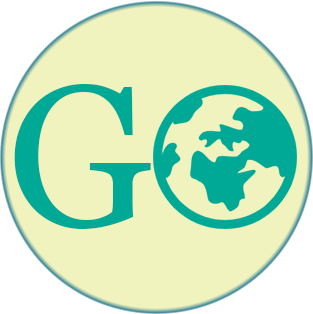
<style>
.page{position:relative;width:313px;height:314px;background:#f0f3bd}
.page>*{position:absolute;margin:0}
.t1{font:200px "Georgia";color:#00a896}
</style>
<div class="page">
<p class="t1" style="left:14px;top:84px;width:137px;height:145px">G</p>
</div>
